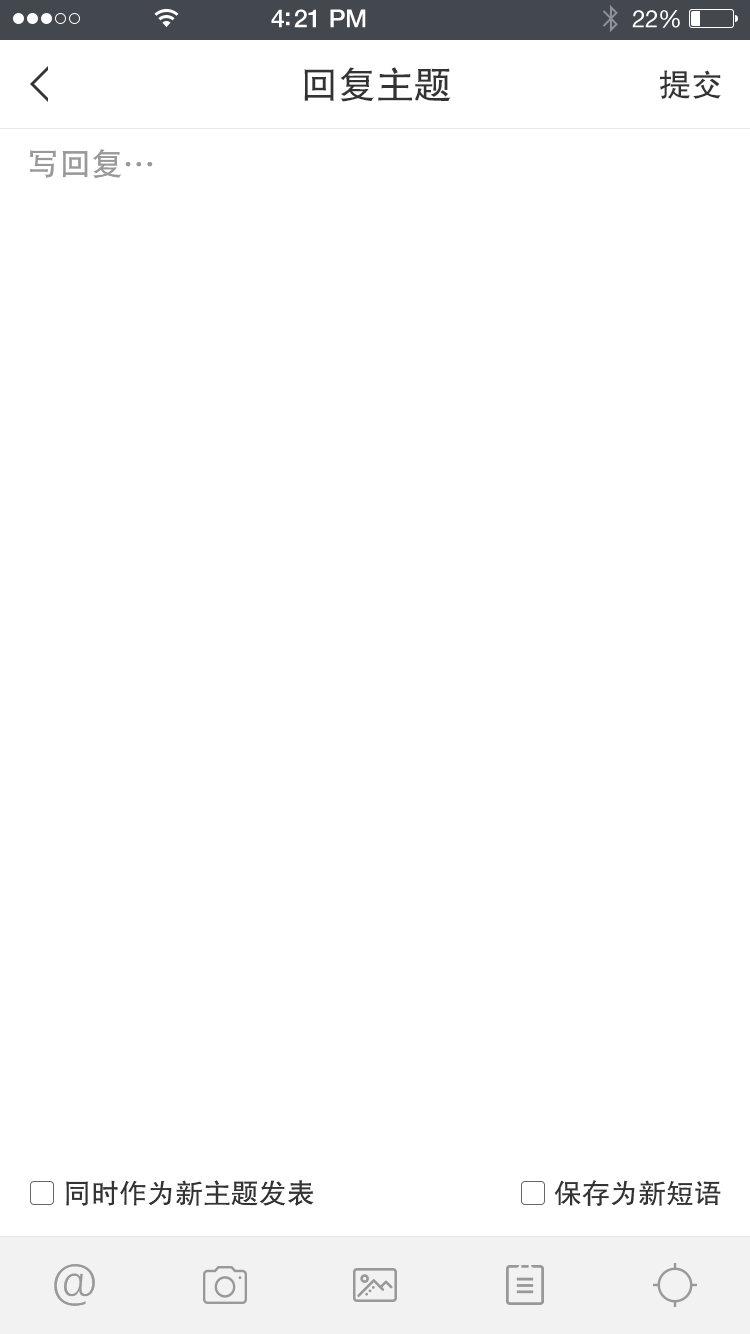
<style>
.page{position:relative;width:750px;height:1334px;background:#ffffff}
.page>*{position:absolute;margin:0}
.t1{font:38px "FZHTJW--GB1-0";color:#333333}
.t2{font:32px "FZHTJW--GB1-0";color:#333333}
.t3{font:32px "FZHTJW--GB1-0";color:#999999}
.t4{font:28px "FZHTJW--GB1-0";color:#333333}
.t5{font:48px "FZDX--GB1-4";color:#999999}
</style>
<div class="page">
<p class="t1" style="left:304px;top:67px;width:147px;height:35px">回复主题</p>
<p class="t2" style="left:660px;top:70px;width:61px;height:29px">提交</p>
<p class="t3" style="left:30px;top:149px;width:123px;height:29px">写回复…</p>
<p class="t4" style="left:66px;top:1180px;width:248px;height:26px">同时作为新主题发表</p>
<p class="t4" style="left:554px;top:1180px;width:167px;height:26px">保存为新短语</p>
<p class="t5" style="left:54px;top:1264px;width:41px;height:42px">@</p>
</div>
